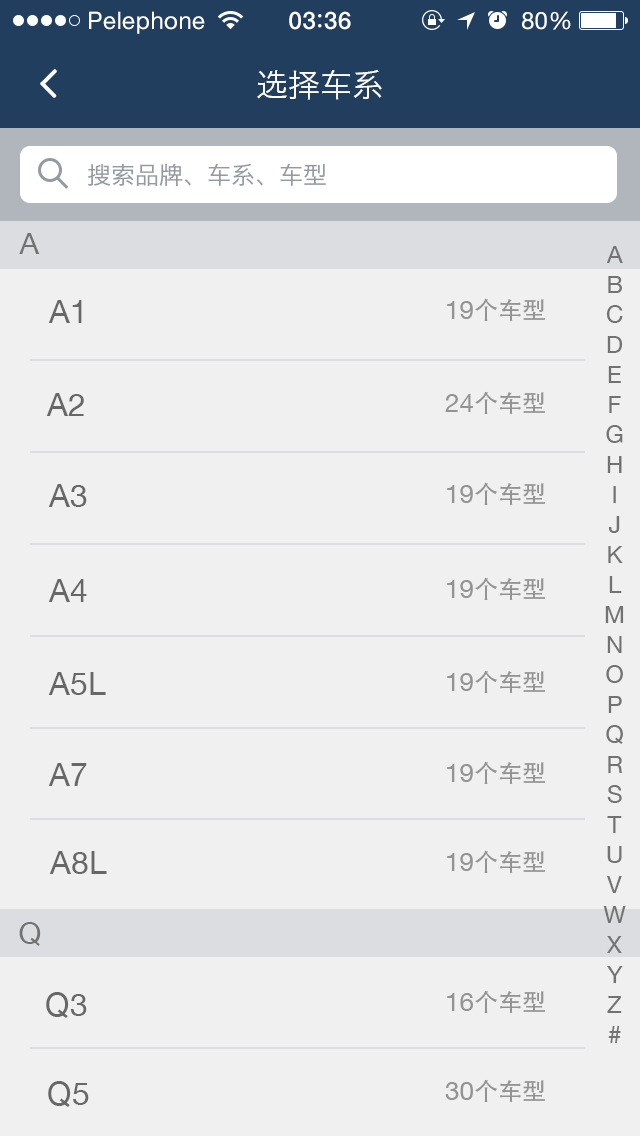
<style>
.page{position:relative;width:640px;height:1136px;background:#f0f0f0}
.page>*{position:absolute;margin:0}
.t1{font:24px "HelveticaNeue";letter-spacing:0.02em;color:#ffffff}
.t2{font:24px "HelveticaNeue-Medium";letter-spacing:0.03em;color:#ffffff}
.t3{font:32px "HiraginoSansGB-W3";color:#ffffff}
.t4{font:24px "HiraginoSansGB-W3";color:#949aa1}
.t5{font:30px "HelveticaNeue";color:#727272}
.t6{font:24px/30px "HelveticaNeue";color:#727272}
.t7{font:32px "HelveticaNeue";color:#676767}
.t8{font:24px "AdobeHeitiStd-Regular";color:#939393}
.t9{font:26px "HelveticaNeue";color:#939393}
</style>
<div class="page">
<p class="t1" style="left:89px;top:11px;width:116px;height:23px">Pelephone</p>
<p class="t2" style="left:289px;top:11px;width:62px;height:19px">03 36</p>
<p class="t1" style="left:522px;top:11px;width:49px;height:19px">80%</p>
<p class="t3" style="left:257px;top:69px;width:125px;height:31px">选择车系</p>
<p class="t4" style="left:88px;top:163px;width:238px;height:23px">搜索品牌、车系、车型</p>
<p class="t5" style="left:19px;top:233px;width:21px;height:21px">A</p>
<p class="t6" style="left:603px;top:246px;width:23px;height:797px;text-align:center">A<br>B<br>C<br>D<br>E<br>F<br>G<br>H<br>I<br>J<br>K<br>L<br>M<br>N<br>O<br>P<br>Q<br>R<br>S<br>T<br>U<br>V<br>W<br>X<br>Y<br>Z<br>#</p>
<p class="t7" style="left:48px;top:300px;width:34px;height:23px">A1</p>
<p class="t8" style="left:447px;top:298px;width:98px;height:23px"><span class="t9">19</span>个车型</p>
<p class="t7" style="left:46px;top:393px;width:38px;height:23px">A2</p>
<p class="t8" style="left:445px;top:391px;width:100px;height:23px"><span class="t9">24</span>个车型</p>
<p class="t7" style="left:48px;top:484px;width:39px;height:23px">A3</p>
<p class="t8" style="left:447px;top:482px;width:98px;height:23px"><span class="t9">19</span>个车型</p>
<p class="t7" style="left:48px;top:579px;width:39px;height:23px">A4</p>
<p class="t8" style="left:447px;top:577px;width:98px;height:23px"><span class="t9">19</span>个车型</p>
<p class="t7" style="left:48px;top:672px;width:58px;height:23px">A5L</p>
<p class="t8" style="left:447px;top:670px;width:98px;height:23px"><span class="t9">19</span>个车型</p>
<p class="t8" style="left:447px;top:761px;width:98px;height:23px"><span class="t9">19</span>个车型</p>
<p class="t7" style="left:48px;top:763px;width:39px;height:23px">A7</p>
<p class="t7" style="left:49px;top:851px;width:58px;height:23px">A8L</p>
<p class="t8" style="left:447px;top:850px;width:98px;height:23px"><span class="t9">19</span>个车型</p>
<p class="t5" style="left:19px;top:922px;width:22px;height:24px">Q</p>
<p class="t8" style="left:447px;top:990px;width:98px;height:23px"><span class="t9">16</span>个车型</p>
<p class="t7" style="left:46px;top:992px;width:41px;height:26px">Q3</p>
<p class="t7" style="left:48px;top:1081px;width:41px;height:26px">Q5</p>
<p class="t8" style="left:445px;top:1079px;width:100px;height:23px"><span class="t9">30</span>个车型</p>
</div>
